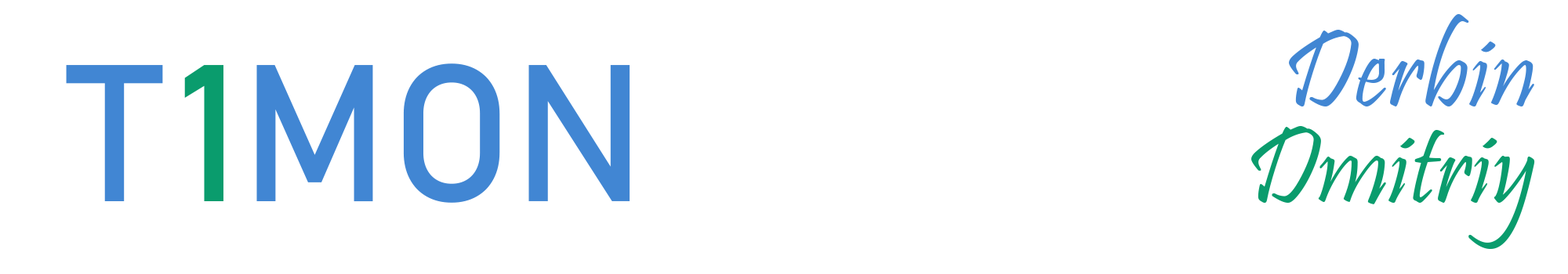
<style>
.page{position:relative;width:1568px;height:274px;background:#ffffff}
.page>*{position:absolute;margin:0}
.t1{font:111.3px/96.4px "Pristina-Regular";color:#0a9c6d}
.t2{font:111.3px/96.4px "Pristina-Regular";color:#4186d3}
.t3{font:192.1px "Bahnschrift";color:#4186d3}
.t4{font:192.1px "Bahnschrift";letter-spacing:0.08em;color:#4186d3}
.t5{font:192.1px "Bahnschrift";color:#0a9c6d}
</style>
<div class="page">
<p class="t1" style="left:1251px;top:14px;width:284px;height:235px;text-align:right"><span class="t2">Derbin<br></span>Dmitriy</p>
<p class="t3" style="left:66px;top:64px;width:564px;height:139px"><span class="t4">T</span><span class="t5">1</span>MON</p>
</div>
